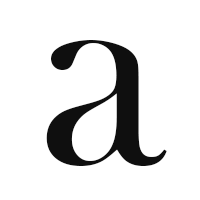
<style>
.page{position:relative;width:200px;height:200px;background:#ffffff}
.page>*{position:absolute;margin:0}
.t1{font:293px "BaskOldFace";color:#0f0f0f}
</style>
<div class="page">
<p class="t1" style="left:46px;top:40px;width:121px;height:126px">a</p>
</div>
